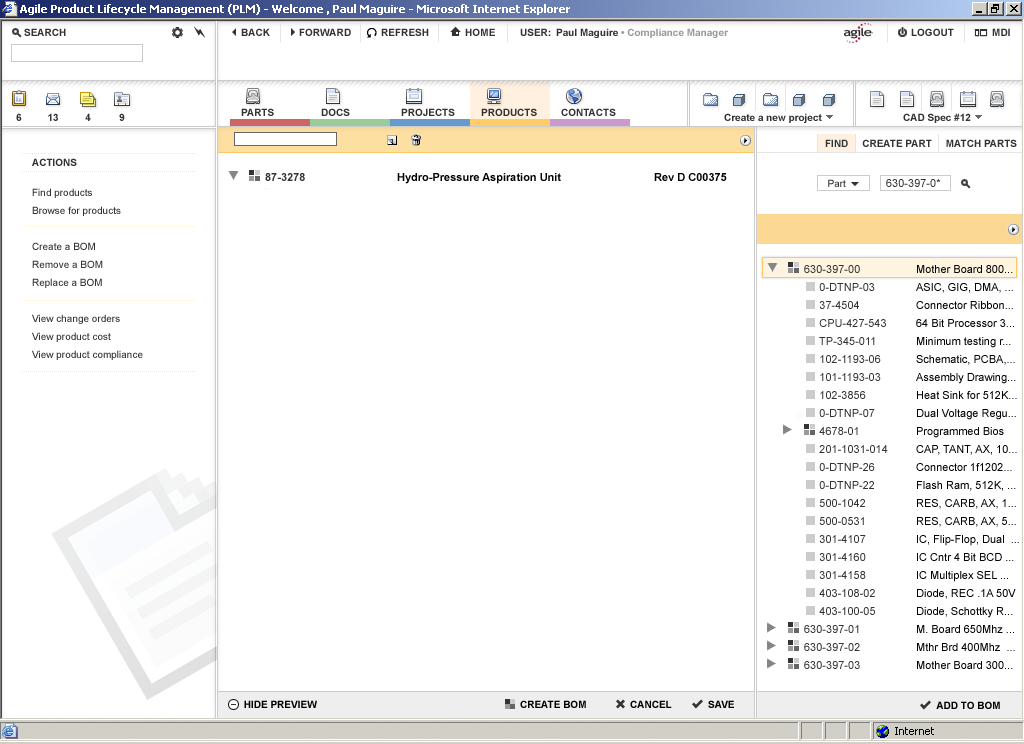
<style>
.page{position:relative;width:1024px;height:744px;background:#ffffff}
.page>*{position:absolute;margin:0}
.t1{font:10px "Arial-BoldMT";color:#333333}
.t2{font:11px "Arial-BoldMT";color:#333333}
.t3{font:11px "Arial-BoldMT";color:#000000}
.t4{font:10px "ArialMT";color:#333333}
.t5{font:11px "ArialMT";color:#333333}
.t6{font:10px/18px "ArialMT";color:#333333}
.t7{font:11px/18px "ArialMT";color:#333333}
.t8{font:11px/18px "ArialMT";color:#000000}
.t9{font:10px "Arial-BoldMT";color:#000000}
</style>
<div class="page">
<p class="t1" style="left:825px;top:139px;width:192px;height:8px">FIND     CREATE PART     MATCH PARTS</p>
<p class="t1" style="left:32px;top:158px;width:45px;height:8px">ACTIONS</p>
<p class="t2" style="left:265px;top:173px;width:40px;height:8px">87-3278</p>
<p class="t3" style="left:397px;top:173px;width:164px;height:11px">Hydro-Pressure Aspiration Unit</p>
<p class="t3" style="left:654px;top:173px;width:73px;height:8px">Rev D C00375</p>
<p class="t4" style="left:828px;top:179px;width:18px;height:8px">Part</p>
<p class="t5" style="left:886px;top:179px;width:55px;height:8px">630-397-0*</p>
<p class="t6" style="left:32px;top:188px;width:111px;height:172px">Find products<br>Browse for products<br><br>Create a BOM<br>Remove a BOM<br>Replace a BOM<br><br>View change orders<br>View product cost<br>View product compliance</p>
<p class="t7" style="left:804px;top:265px;width:84px;height:404px">630-397-00<br>     0-DTNP-03 <br>     37-4504            <br>     CPU-427-543<br>     TP-345-011<br>     102-1193-06<br>     101-1193-03<br>     102-3856<br>     0-DTNP-07<br>     4678-01<br>     201-1031-014<br>     0-DTNP-26<br>     0-DTNP-22<br>     500-1042<br>     500-0531<br>     301-4107<br>     301-4160<br>     301-4158<br>     403-108-02<br>     403-100-05<br>630-397-01<br>630-397-02<br>630-397-03</p>
<p class="t8" style="left:916px;top:265px;width:103px;height:404px">Mother Board 800...<br>ASIC, GIG, DMA, ...<br>Connector Ribbon...<br>64 Bit Processor 3...<br>Minimum testing r...<br>Schematic, PCBA,...<br>Assembly Drawing...<br>Heat Sink for 512K...<br>Dual Voltage Regu...<br>Programmed Bios<br>CAP, TANT, AX, 10...<br>Connector 1f1202...<br>Flash Ram, 512K, ...<br>RES, CARB, AX, 1...<br>RES, CARB, AX, 5...<br>IC, Flip-Flop, Dual  ...<br>IC Cntr 4 Bit BCD ...<br>IC Multiplex SEL ...<br>Diode, REC .1A 50V<br>Diode, Schottky R...<br>M. Board 650Mhz ...<br>Mthr Brd 400Mhz  ...<br>Mother Board 300...</p>
<p class="t9" style="left:244px;top:700px;width:73px;height:8px">HIDE PREVIEW</p>
<p class="t9" style="left:520px;top:700px;width:66px;height:8px">CREATE BOM</p>
<p class="t9" style="left:630px;top:700px;width:42px;height:8px">CANCEL</p>
<p class="t9" style="left:708px;top:700px;width:26px;height:8px">SAVE</p>
<p class="t9" style="left:936px;top:701px;width:64px;height:8px">ADD TO BOM</p>
</div>
